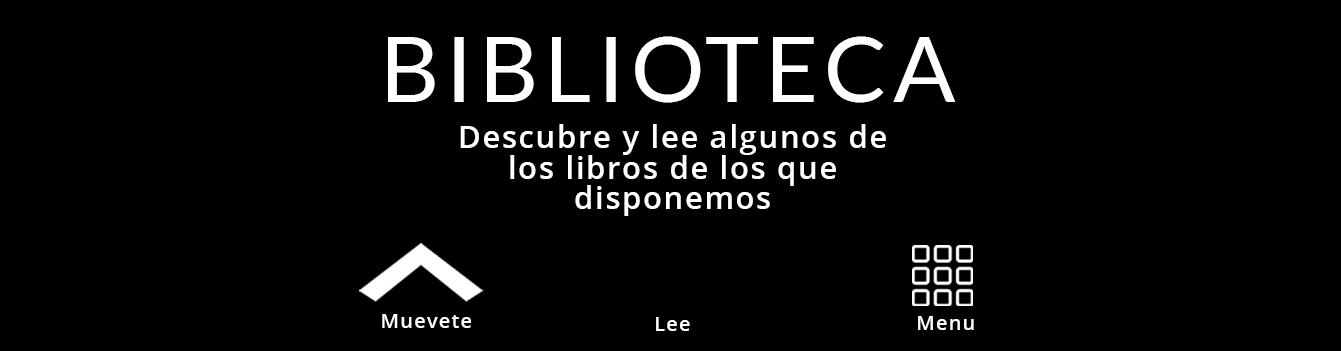
<style>
.page{position:relative;width:1341px;height:351px;background:#000000}
.page>*{position:absolute;margin:0}
.t1{font:92px "Lato-Regular";letter-spacing:0.06em;color:#ffffff}
.t2{font:30.7px/30.7px "OpenSans-Semibold";letter-spacing:0.06em;color:#ffffff}
.t3{font:20px "OpenSans-Semibold";letter-spacing:0.06em;color:#ffffff}
</style>
<div class="page">
<p class="t1" style="left:388px;top:36px;width:568px;height:67px">BIBLIOTECA</p>
<p class="t2" style="left:460px;top:124px;width:426px;height:92px;text-align:center">Descubre y lee algunos de<br>los libros de los que<br>disponemos</p>
<p class="t3" style="left:382px;top:314px;width:89px;height:14px">Muevete</p>
<p class="t3" style="left:656px;top:317px;width:34px;height:14px">Lee</p>
<p class="t3" style="left:918px;top:316px;width:56px;height:14px">Menu</p>
</div>
